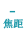
<style>
.page{position:relative;width:25px;height:30px;background:#ffffff}
.page>*{position:absolute;margin:0}
.t1{font:10px "SimSun";color:#1795a6;font-weight:bold}
</style>
<div class="page">
<p class="t1" style="left:3px;top:18px;width:21px;height:11px">焦距</p>
</div>
